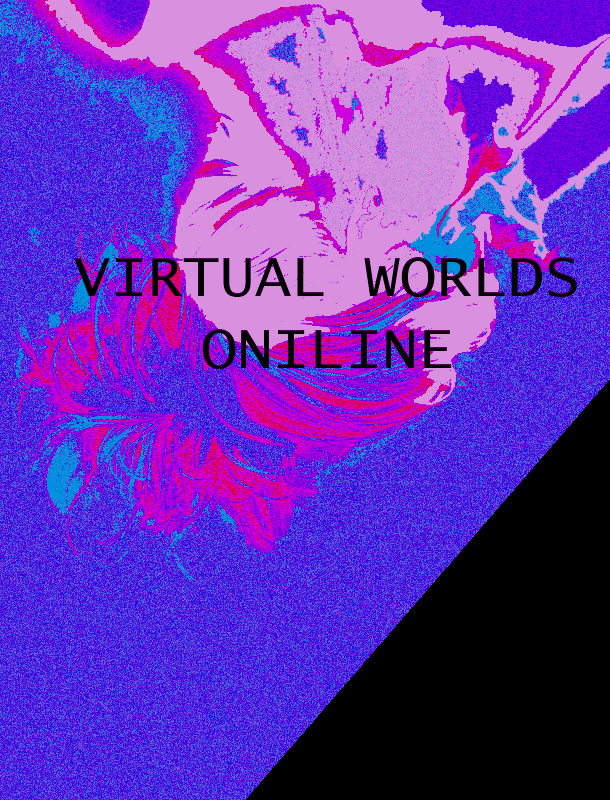
<style>
.page{position:relative;width:610px;height:800px}
.page>*{position:absolute;margin:0}
.t1{font:60px "LucidaConsole";color:#000000}
</style>
<div class="page">
<p class="t1" style="left:74px;top:257px;width:503px;height:112px;text-align:center">VIRTUAL WORLDS ONILINE</p>
</div>
